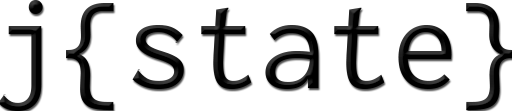
<style>
.page{position:relative;width:512px;height:111px;background:#ffffff}
.page>*{position:absolute;margin:0}
.t1{font:133.3px "Inconsolata-Regular";color:#000000}
</style>
<div class="page">
<p class="t1" style="left:0px;top:0px;width:514px;height:111px">j{state}</p>
</div>
